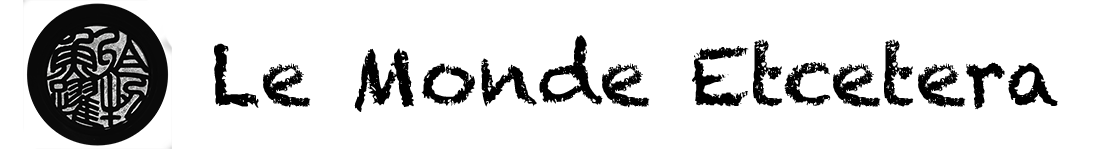
<style>
.page{position:relative;width:1100px;height:149px;background:#ffffff}
.page>*{position:absolute;margin:0}
.t1{font:80px "Chalkduster";color:#000000}
</style>
<div class="page">
<p class="t1" style="left:214px;top:35px;width:844px;height:77px">Le Monde Etcetera</p>
</div>
